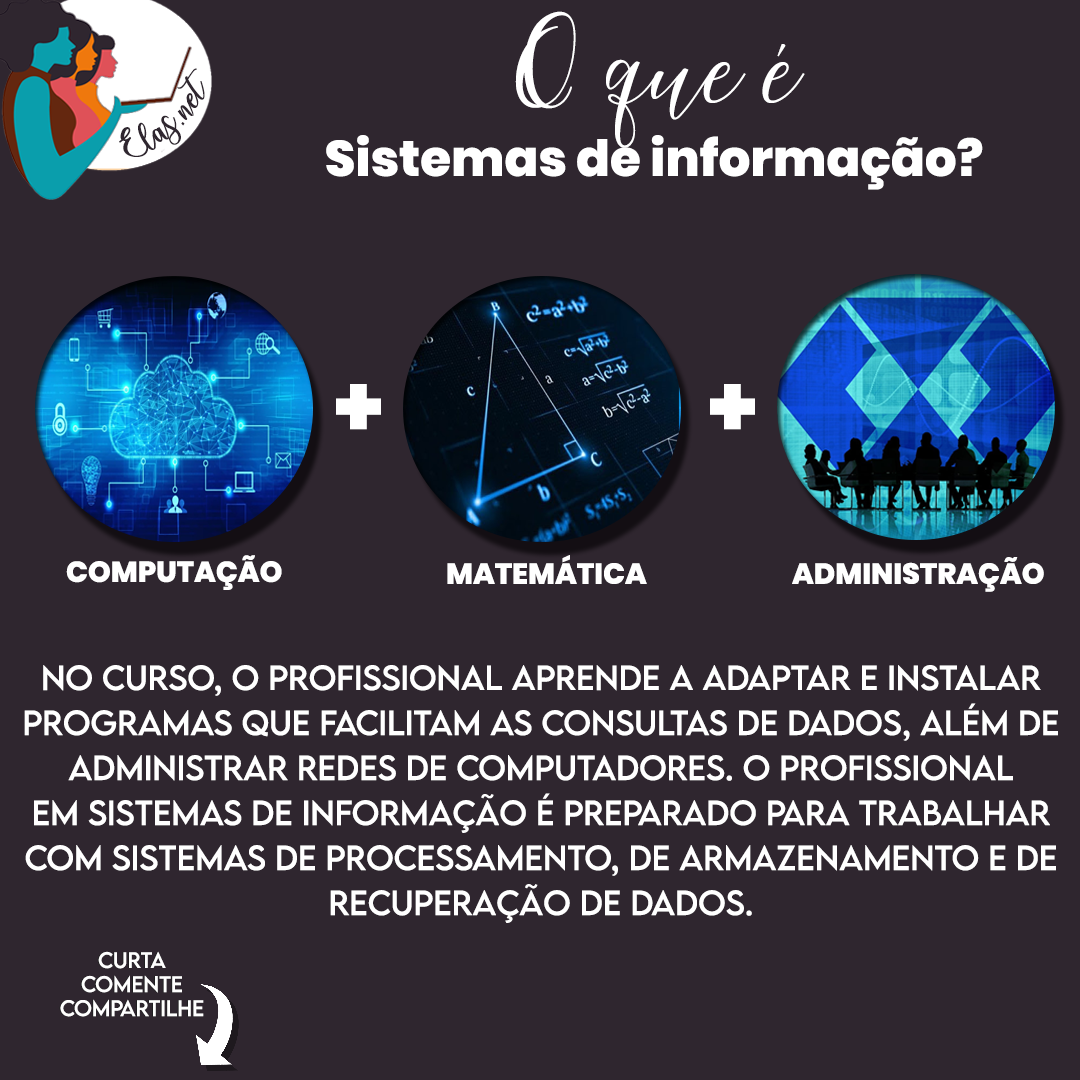
<style>
.page{position:relative;width:1080px;height:1080px;background:#2f262f}
.page>*{position:absolute;margin:0}
.t1{font:50px "Poppins-ExtraBold";color:#ffffff}
.t2{font:142.1px "MaheisaScript";color:#ffffff}
.t3{font:25px "charlinda-Regular";color:#2f262f;scale:1.18 1}
.t4{font:88px "Poppins-ExtraBold";color:#ffffff}
.t5{font:29px "Poppins-ExtraBold";color:#ffffff}
.t6{font:31px/45px "LEMONMILK-Regular";color:#ffffff}
.t7{font:20px "LEMONMILK-Regular"}
.t8{font:20px "LEMONMILK-Regular";color:#ffffff}
</style>
<div class="page">
<p class="t1" style="left:326px;top:11px;width:657px;height:179px;text-align:center"><span class="t2">O que é<br></span>Sistemas de informação?</p>
<p class="t3" style="left:119px;top:68px;width:86px;height:89px;rotate:-43deg">Elas.net</p>
<p class="t4" style="left:336px;top:384px;width:45px;height:46px">+</p>
<p class="t4" style="left:710px;top:384px;width:45px;height:46px">+</p>
<p class="t5" style="left:66px;top:555px;width:216px;height:35px">COMPUTAÇÃO</p>
<p class="t5" style="left:447px;top:555px;width:200px;height:29px">MATEMÁTICA</p>
<p class="t5" style="left:792px;top:557px;width:252px;height:35px">ADMINISTRAÇÃO</p>
<p class="t6" style="left:24px;top:665px;width:1034px;height:258px;text-align:center">No curso, o profissional aprende a adaptar e instalar<br>programas que facilitam as consultas de dados, além de<br>administrar redes de computadores. O profissional<br>em sistemas de informação é preparado para trabalhar<br>com sistemas de processamento, de armazenamento e de<br>recuperação de dados.</p>
<p class="t7" style="left:59px;top:951px;width:144px;height:66px;text-align:center">Curta<br>Comente<br>Compartilhe</p>
<p class="t8" style="left:60px;top:951px;width:144px;height:66px;text-align:center">Curta<br>Comente<br>Compartilhe</p>
</div>
